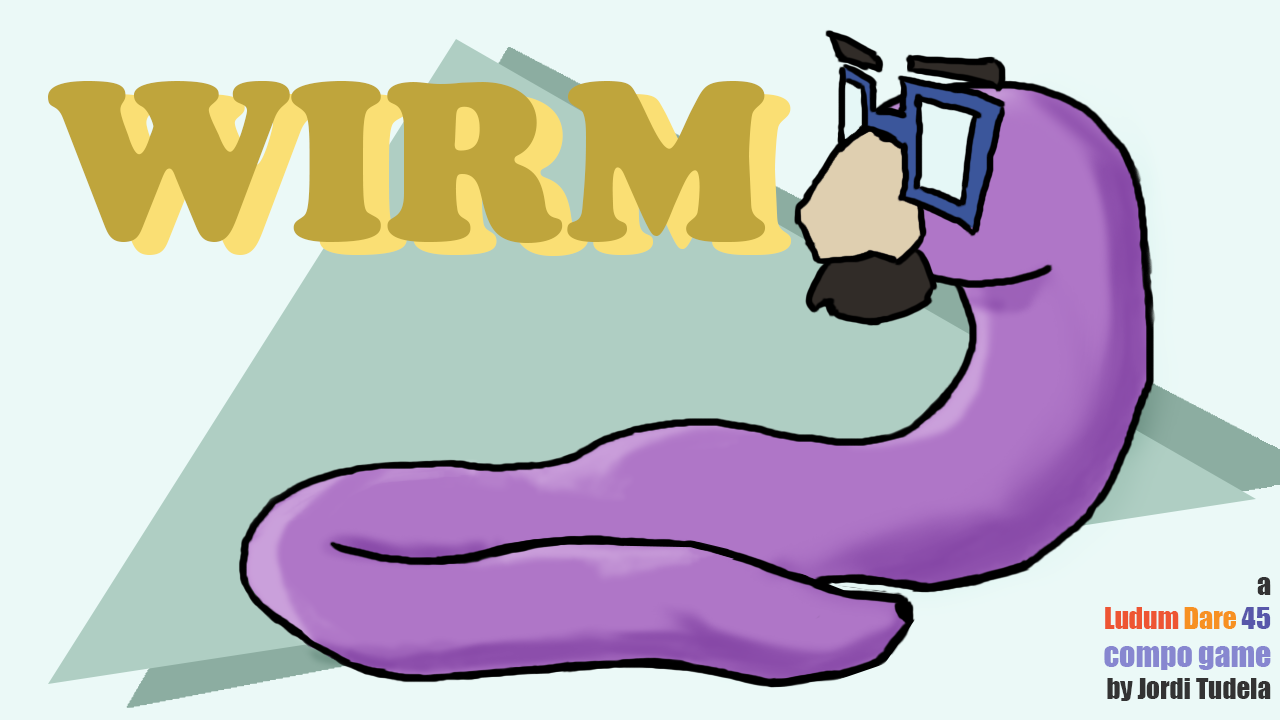
<style>
.page{position:relative;width:1280px;height:720px;background:#ebf9f7}
.page>*{position:absolute;margin:0}
.t1{font:220.9px "CooperBlackStd";color:#bfa53c}
.t2{font:220.9px "CooperBlackStd"}
.t3{font:27px "Impact";color:#333333}
.t4{font:27.6px "Impact";color:#333333}
.t5{font:27.6px "Impact";color:#ee5533}
.t6{font:27.6px "Impact";color:#f79122}
.t7{font:28.3px "Impact";color:#5858aa}
.t8{font:31.7px "Impact";color:#8787d0}
</style>
<div class="page">
<p class="t1" style="left:48px;top:81px;width:718px;height:162px">WIRM</p>
<p class="t2" style="left:74px;top:94px;width:718px;height:162px">WIRM</p>
<p class="t3" style="left:1104px;top:577px;width:167px;height:124px;text-align:right"><span class="t4">a<br></span><span class="t5">Ludum </span><span class="t6">Dare </span><span class="t7">45<br></span><span class="t8"> compo game<br></span>by Jordi Tudela</p>
</div>
